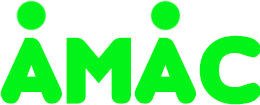
<style>
.page{position:relative;width:260px;height:105px;background:#ffffff}
.page>*{position:absolute;margin:0}
.t1{font:100px "Insaniburger-with-Cheese";color:#01f318}
</style>
<div class="page">
<p class="t1" style="left:0px;top:35px;width:261px;height:70px">AMAc</p>
</div>
